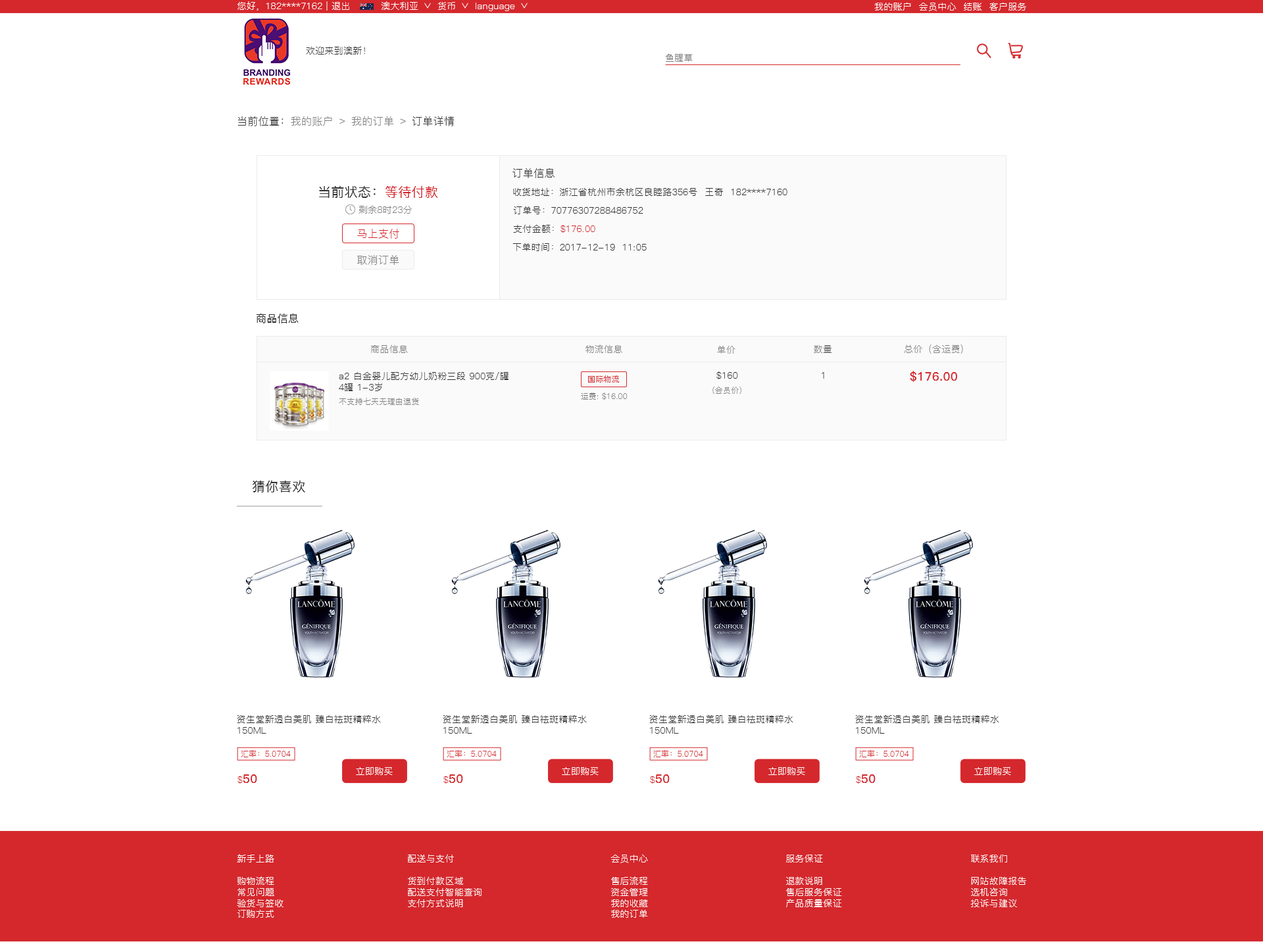
<style>
.page{position:relative;width:1263px;height:944px;background:#ffffff}
.page>*{position:absolute;margin:0}
.t1{font:9.2px "PingFang-SC-Regular";letter-spacing:0.02em;color:#ffffff}
.t2{font:9.2px "PingFang-SC-Regular";letter-spacing:0.02em;color:#333333}
.t3{font:9.2px "PingFang-SC-Regular";letter-spacing:0.02em;color:#767676}
.t4{font:10.5px "PingFang-SC-Regular";letter-spacing:0.02em;color:#808080}
.t5{font:10.5px "PingFang-SC-Regular";letter-spacing:0.02em;color:#333333}
.t6{font:13.2px "PingFang-SC-Medium";letter-spacing:0.02em;color:#333333}
.t7{font:13.2px "PingFang-SC-Medium";letter-spacing:0.02em;color:#d4282d}
.t8{font:9.2px "PingFang-SC-Regular";letter-spacing:0.02em;color:#808080}
.t9{font:9.2px "PingFang-SC-Regular";letter-spacing:0.02em;color:#343434}
.t10{font:10.5px "PingFang-SC-Regular";letter-spacing:0.02em;color:#d4282d}
.t11{font:9.2px "PingFang-SC-Regular";letter-spacing:0.02em;color:#d4282d}
.t12{font:10.5px "PingFang-SC-Medium";letter-spacing:0.02em;color:#333333}
.t13{font:7.9px "PingFang-SC-Medium";letter-spacing:0.02em;color:#d4282d}
.t14{font:11.8px "PingFang-SC-Bold";letter-spacing:0.02em;color:#d4282d}
.t15{font:7.9px "PingFang-SC-Regular";letter-spacing:0.02em;color:#808080}
.t16{font:7.9px "PingFang-SC-Regular";letter-spacing:0.02em;color:#d4282d}
.t17{font:9.2px "PingFang-SC-Regular";letter-spacing:0.02em;color:#fffefe}
</style>
<div class="page">
<p class="t1" style="left:237px;top:1px;width:112px;height:10px">您好，182****7162 | 退出</p>
<p class="t1" style="left:381px;top:1px;width:37px;height:9px">澳大利亚</p>
<p class="t1" style="left:437px;top:2px;width:18px;height:8px">货币</p>
<p class="t1" style="left:475px;top:3px;width:40px;height:8px">language</p>
<p class="t1" style="left:874px;top:2px;width:152px;height:9px">我的账户  会员中心  结账  客户服务</p>
<p class="t2" style="left:306px;top:46px;width:59px;height:9px">欢迎来到澳新！</p>
<p class="t3" style="left:665px;top:54px;width:27px;height:8px">鱼腥草</p>
<p class="t4" style="left:237px;top:116px;width:217px;height:10px"><span class="t5">当前位置：</span>我的账户 ﹥ 我的订单 ﹥<span class="t5"> 订单详情</span></p>
<p class="t5" style="left:512px;top:168px;width:42px;height:10px">订单信息</p>
<p class="t6" style="left:319px;top:185px;width:119px;height:13px">当前状态：<span class="t7">等待付款</span></p>
<p class="t2" style="left:513px;top:187px;width:274px;height:9px">收货地址：浙江省杭州市余杭区良睦路356号  王奇  182****7160</p>
<p class="t8" style="left:358px;top:206px;width:54px;height:8px">剩余8时23分</p>
<p class="t9" style="left:513px;top:206px;width:130px;height:8px"><span class="t2">订单号：</span>70776307288486752</p>
<p class="t10" style="left:357px;top:229px;width:42px;height:10px">马上支付</p>
<p class="t11" style="left:513px;top:224px;width:82px;height:9px"><span class="t2">支付金额：</span>$176.00</p>
<p class="t2" style="left:512px;top:243px;width:134px;height:8px">下单时间：2017-12-19  11:05</p>
<p class="t4" style="left:357px;top:255px;width:42px;height:10px">取消订单</p>
<p class="t12" style="left:256px;top:314px;width:43px;height:10px">商品信息</p>
<p class="t8" style="left:370px;top:345px;width:38px;height:8px">商品信息</p>
<p class="t8" style="left:585px;top:345px;width:37px;height:8px">物流信息</p>
<p class="t8" style="left:717px;top:346px;width:18px;height:8px">单价</p>
<p class="t8" style="left:814px;top:345px;width:18px;height:8px">数量</p>
<p class="t8" style="left:904px;top:345px;width:59px;height:9px">总价（含运费）</p>
<p class="t2" style="left:339px;top:372px;width:169px;height:19px">a2 白金婴儿配方幼儿奶粉三段 900克/罐 <br>4罐 1-3岁</p>
<p class="t13" style="left:588px;top:376px;width:31px;height:7px">国际物流</p>
<p class="t2" style="left:716px;top:372px;width:22px;height:7px">$160</p>
<p class="t2" style="left:821px;top:372px;width:3px;height:7px">1</p>
<p class="t14" style="left:910px;top:371px;width:47px;height:11px">$176.00</p>
<p class="t15" style="left:712px;top:387px;width:29px;height:7px">(会员价)</p>
<p class="t15" style="left:339px;top:398px;width:80px;height:7px">不支持七天无理由退货</p>
<p class="t15" style="left:581px;top:393px;width:46px;height:7px">运费: $16.00</p>
<p class="t6" style="left:253px;top:480px;width:52px;height:13px">猜你喜欢</p>
<p class="t2" style="left:237px;top:715px;width:144px;height:19px">资生堂新透白美肌 臻白祛斑精粹水<br>150ML</p>
<p class="t2" style="left:443px;top:715px;width:144px;height:19px">资生堂新透白美肌 臻白祛斑精粹水<br>150ML</p>
<p class="t2" style="left:649px;top:715px;width:144px;height:19px">资生堂新透白美肌 臻白祛斑精粹水<br>150ML</p>
<p class="t2" style="left:855px;top:715px;width:144px;height:19px">资生堂新透白美肌 臻白祛斑精粹水<br>150ML</p>
<p class="t16" style="left:241px;top:750px;width:50px;height:8px">汇率：5.0704</p>
<p class="t16" style="left:447px;top:750px;width:50px;height:8px">汇率：5.0704</p>
<p class="t16" style="left:653px;top:750px;width:50px;height:8px">汇率：5.0704</p>
<p class="t16" style="left:859px;top:750px;width:50px;height:8px">汇率：5.0704</p>
<p class="t1" style="left:356px;top:767px;width:37px;height:8px">立即购买</p>
<p class="t1" style="left:562px;top:767px;width:36px;height:8px">立即购买</p>
<p class="t1" style="left:768px;top:767px;width:37px;height:8px">立即购买</p>
<p class="t1" style="left:974px;top:767px;width:37px;height:8px">立即购买</p>
<p class="t14" style="left:237px;top:775px;width:20px;height:9px"><span class="t11">$</span>50</p>
<p class="t14" style="left:443px;top:775px;width:20px;height:9px"><span class="t11">$</span>50</p>
<p class="t14" style="left:650px;top:775px;width:19px;height:9px"><span class="t11">$</span>50</p>
<p class="t14" style="left:856px;top:775px;width:19px;height:9px"><span class="t11">$</span>50</p>
<p class="t17" style="left:237px;top:854px;width:46px;height:64px">新手上路<br><br>购物流程<br>常见问题<br>验货与签收<br>订购方式</p>
<p class="t17" style="left:408px;top:854px;width:73px;height:54px">配送与支付<br><br>货到付款区域<br>配送支付智能查询<br>支付方式说明</p>
<p class="t17" style="left:610px;top:855px;width:38px;height:63px">会员中心<br><br>售后流程<br>资金管理<br>我的收藏<br>我的订单</p>
<p class="t17" style="left:786px;top:855px;width:56px;height:53px">服务保证<br><br>退款说明<br>售后服务保证<br>产品质量保证</p>
<p class="t17" style="left:970px;top:855px;width:56px;height:53px">联系我们<br><br>网站故障报告<br>选机咨询<br>投诉与建议</p>
</div>
